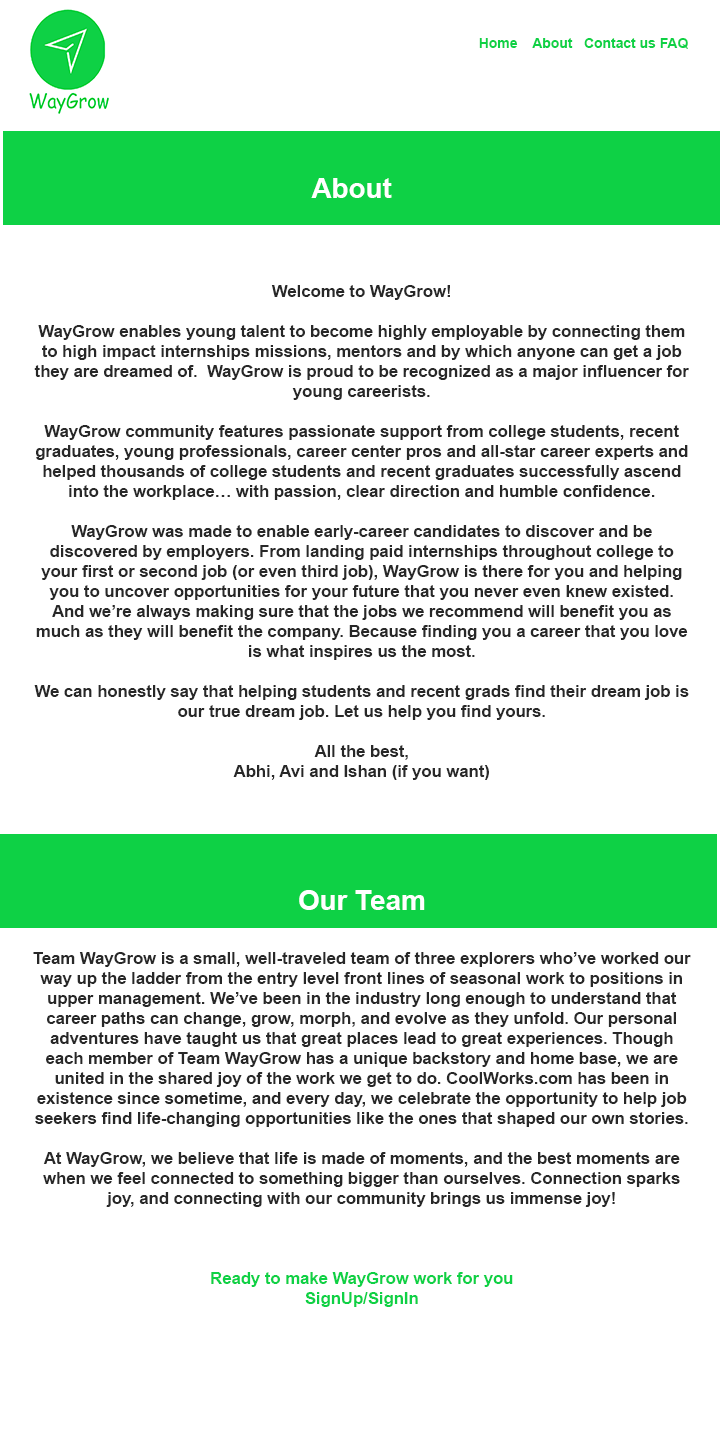
<style>
.page{position:relative;width:720px;height:1440px;background:#ffffff}
.page>*{position:absolute;margin:0}
.t1{font:13.9px "Arial-BoldMT";color:#0ed145}
.t2{font:27.8px "Arial-BoldMT";color:#ffffff}
.t3{font:16.7px "Arial-BoldMT";color:#282828}
.t4{font:16.7px "Arial-BoldMT";color:#0ed145}
</style>
<div class="page">
<p class="t1" style="left:479px;top:38px;width:209px;height:11px">Home    About   Contact us FAQ</p>
<p class="t2" style="left:311px;top:178px;width:81px;height:20px">About</p>
<p class="t3" style="left:33px;top:285px;width:658px;height:1022px;text-align:center">Welcome to WayGrow!                      <br><br>WayGrow enables young talent to become highly employable by connecting them to high impact internships missions, mentors and by which anyone can get a job they are dreamed of.  WayGrow is proud to be recognized as a major influencer for young careerists.<br><br>WayGrow community features passionate support from college students, recent graduates, young professionals, career center pros and all-star career experts and helped thousands of college students and recent graduates successfully ascend into the workplace… with passion, clear direction and humble confidence.<br><br>WayGrow was made to enable early-career candidates to discover and be discovered by employers. From landing paid internships throughout college to your first or second job (or even third job), WayGrow is there for you and helping you to uncover opportunities for your future that you never even knew existed. And we’re always making sure that the jobs we recommend will benefit you as much as they will benefit the company. Because finding you a career that you love is what inspires us the most.<br><br>We can honestly say that helping students and recent grads find their dream job is our true dream job. Let us help you find yours.<br><br>All the best,<br>Abhi, Avi and Ishan (if you want)<br><br><br><br><br><br><span class="t2">Our Team<br><br></span>Team WayGrow is a small, well-traveled team of three explorers who’ve worked our way up the ladder from the entry level front lines of seasonal work to positions in upper management. We’ve been in the industry long enough to understand that career paths can change, grow, morph, and evolve as they unfold. Our personal adventures have taught us that great places lead to great experiences. Though each member of Team WayGrow has a unique backstory and home base, we are united in the shared joy of the work we get to do. CoolWorks.com has been in existence since sometime, and every day, we celebrate the opportunity to help job seekers find life-changing opportunities like the ones that shaped our own stories.<br><br>At WayGrow, we believe that life is made of moments, and the best moments are when we feel connected to something bigger than ourselves. Connection sparks joy, and connecting with our community brings us immense joy!<br><br><br><br><span class="t4">Ready to make WayGrow work for you<br>SignUp/SignIn</span></p>
</div>
